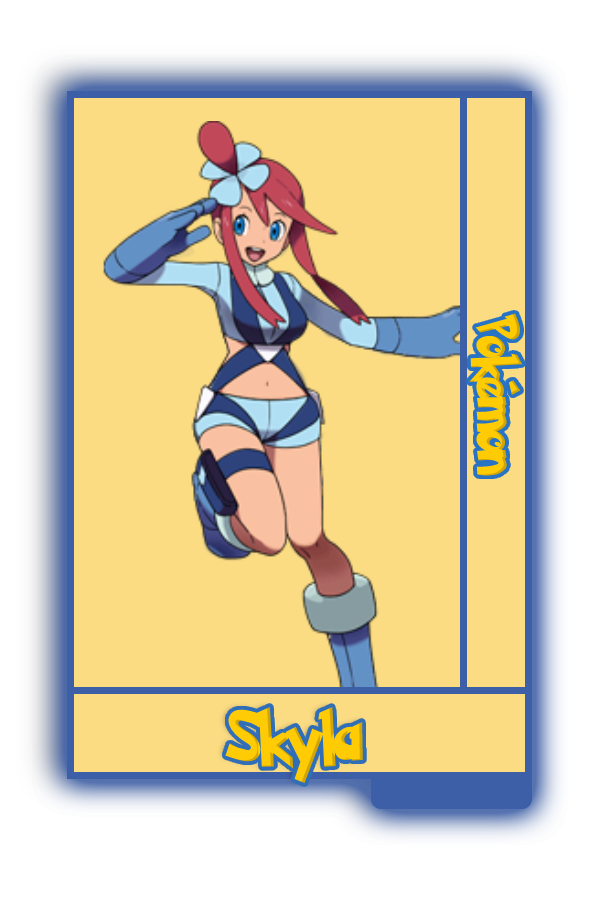
<style>
.page{position:relative;width:600px;height:900px;background:#fbdc83}
.page>*{position:absolute;margin:0}
.t1{font:48.8px "PokemonSolidNormal";color:#ffcb05;scale:0.8 1}
.t2{font:56.6px "PokemonSolidNormal";color:#ffcb05;scale:0.92 1}
</style>
<div class="page">
<p class="t1" style="left:469px;top:313px;width:54px;height:163px;rotate:90deg">Pokémon</p>
<p class="t2" style="left:225px;top:706px;width:138px;height:77px">Skyla</p>
</div>
